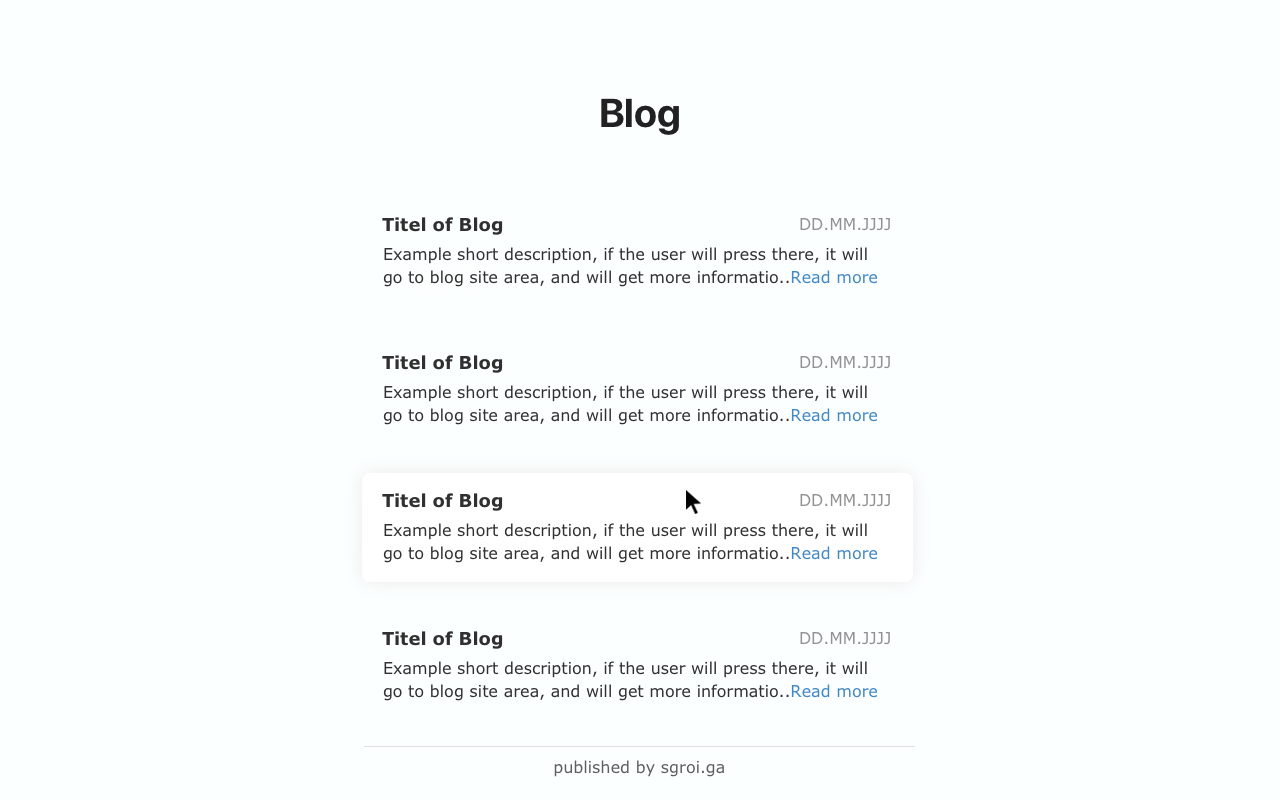
<style>
.page{position:relative;width:1280px;height:800px;background:#fcffff}
.page>*{position:absolute;margin:0}
.t1{font:40px "SFProDisplay-Bold";color:#212121}
.t2{font:18px "Verdana-Bold";color:#303030}
.t3{font:16px "Verdana";color:#919191}
.t4{font:16px/22.5px "Verdana";color:#303030}
.t5{font:16px/22.5px "Verdana";color:#4187c3}
.t6{font:16px "Verdana";color:#5e5e5e}
</style>
<div class="page">
<p class="t1" style="left:601px;top:98px;width:78px;height:37px">Blog</p>
<p class="t2" style="left:382px;top:217px;width:121px;height:18px">Titel of Blog</p>
<p class="t3" style="left:800px;top:218px;width:90px;height:13px">DD.MM.JJJJ</p>
<p class="t4" style="left:383px;top:247px;width:495px;height:40px">Example short description, if the user will press there, it will<br>go to blog site area, and will get more informatio..<span class="t5">Read more</span></p>
<p class="t2" style="left:382px;top:355px;width:121px;height:18px">Titel of Blog</p>
<p class="t3" style="left:800px;top:356px;width:90px;height:13px">DD.MM.JJJJ</p>
<p class="t4" style="left:383px;top:385px;width:495px;height:40px">Example short description, if the user will press there, it will<br>go to blog site area, and will get more informatio..<span class="t5">Read more</span></p>
<p class="t2" style="left:382px;top:493px;width:121px;height:18px">Titel of Blog</p>
<p class="t3" style="left:800px;top:494px;width:90px;height:13px">DD.MM.JJJJ</p>
<p class="t4" style="left:383px;top:523px;width:495px;height:40px">Example short description, if the user will press there, it will<br>go to blog site area, and will get more informatio..<span class="t5">Read more</span></p>
<p class="t2" style="left:382px;top:631px;width:121px;height:18px">Titel of Blog</p>
<p class="t3" style="left:800px;top:632px;width:90px;height:13px">DD.MM.JJJJ</p>
<p class="t4" style="left:383px;top:661px;width:495px;height:40px">Example short description, if the user will press there, it will<br>go to blog site area, and will get more informatio..<span class="t5">Read more</span></p>
<p class="t6" style="left:554px;top:760px;width:170px;height:17px">published by sgroi.ga</p>
</div>
